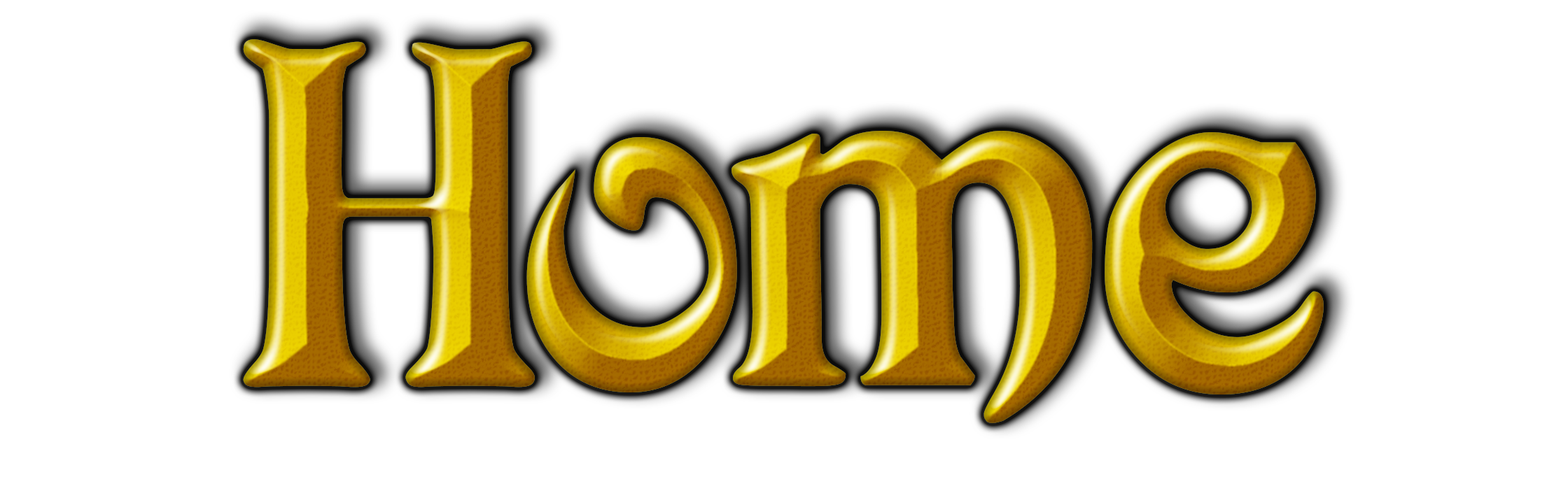
<style>
.page{position:relative;width:1568px;height:498px;background:#ffffff}
.page>*{position:absolute;margin:0}
.t1{font:472.2px "Avatar";letter-spacing:-0.01em}
.t2{font:472.2px "Avatar";letter-spacing:-0.07em}
.t3{font:472.2px "Avatar";letter-spacing:-0.05em}
</style>
<div class="page">
<p class="t1" style="left:243px;top:39px;width:1081px;height:385px"><span class="t2">H</span><span class="t3">o</span>me</p>
<p class="t1" style="left:243px;top:39px;width:1081px;height:385px"><span class="t2">H</span><span class="t3">o</span>me</p>
</div>
